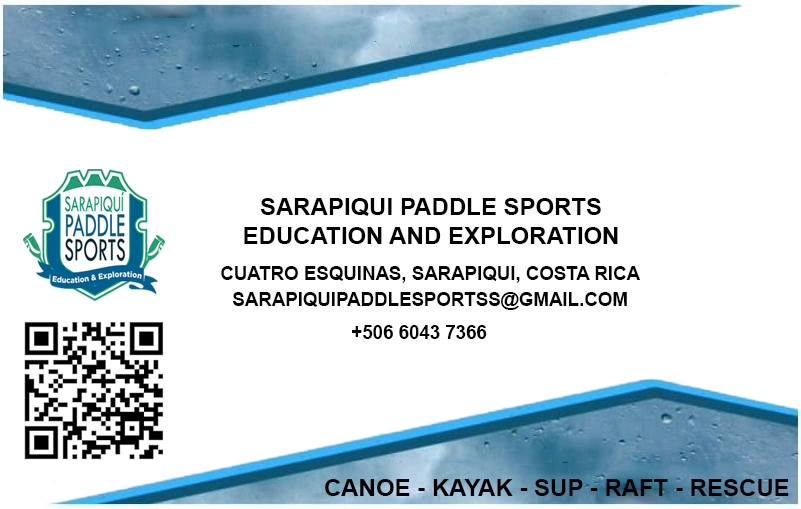
<style>
.page{position:relative;width:801px;height:509px;background:#ffffff}
.page>*{position:absolute;margin:0}
.t1{font:24px "Arial-BoldMT";color:#000000}
.t2{font:18.7px "Arial-BoldMT";color:#000000}
</style>
<div class="page">
<p class="t1" style="left:244px;top:198px;width:374px;height:46px;text-align:center">SARAPIQUI PADDLE SPORTS<br>EDUCATION AND EXPLORATION</p>
<p class="t2" style="left:221px;top:266px;width:419px;height:17px">CUATRO ESQUINAS, SARAPIQUI, COSTA RICA</p>
<p class="t2" style="left:232px;top:292px;width:395px;height:18px">SARAPIQUIPADDLESPORTSS@GMAIL.COM</p>
<p class="t2" style="left:352px;top:325px;width:135px;height:14px">+506 6043 7366</p>
</div>
